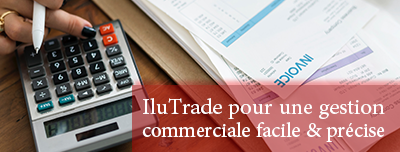
<style>
.page{position:relative;width:400px;height:152px}
.page>*{position:absolute;margin:0}
.t1{font:28.5px "AdobeArabic-Regular";color:#fffefe}
.t2{font:30.9px "AdobeArabic-Regular";color:#fffefe}
</style>
<div class="page">
<p class="t1" style="left:142px;top:98px;width:243px;height:44px"><span class="t2">IluTrade pour une gestion <br></span>commerciale facile &amp; précise</p>
</div>
